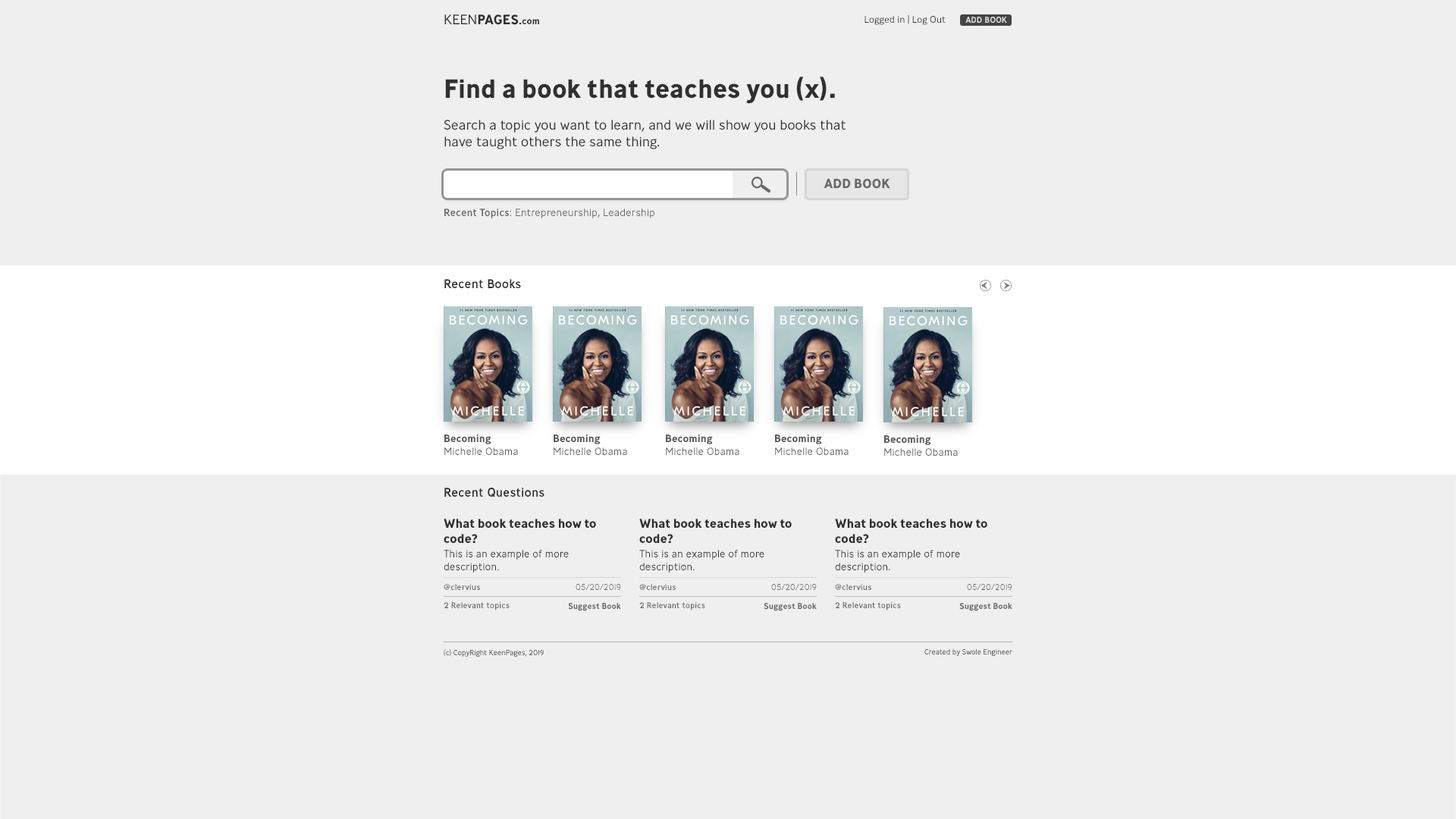
<style>
.page{position:relative;width:1456px;height:819px;background:#efefef}
.page>*{position:absolute;margin:0}
.t1{font:13.7px "Ministry-Bold";color:#303030;text-transform:uppercase}
.t2{font:13.7px "Ministry-Light";color:#303030;text-transform:uppercase}
.t3{font:9.5px "Ministry-Bold";color:#303030}
.t4{font:9.5px "Ministry-Light";color:#303030}
.t5{font:8.4px "Ministry-Medium";color:#ebebeb;text-transform:uppercase}
.t6{font:26.3px "Ministry-Bold";color:#303030}
.t7{font:13.7px "Ministry-Light";color:#303030}
.t8{font:13.2px "Ministry-Bold";color:#676767;text-transform:uppercase}
.t9{font:10.5px "Ministry-Light";color:#676767}
.t10{font:10.5px "Ministry-Medium";color:#676767}
.t11{font:12.6px "Ministry-Medium";color:#303030}
.t12{font:10.5px "Ministry-Light";color:#5c5c5c}
.t13{font:10.5px "Ministry-Bold";color:#5c5c5c}
.t14{font:12.6px "Ministry-Bold";color:#303030}
.t15{font:10.5px/14.7px "Ministry-Light";color:#303030}
.t16{font:10.5px "Ministry-Light";color:#303030}
.t17{font:8.4px "Ministry-Light";color:#696969}
.t18{font:8.4px "Ministry-Medium";color:#696969}
.t19{font:8.4px "Ministry-Medium";color:#696969;text-transform:uppercase}
.t20{font:8.4px "Ministry-Bold";color:#696969}
.t21{font:7.4px "Ministry-Light";color:#303030}
</style>
<div class="page">
<p class="t1" style="left:444px;top:14px;width:95px;height:11px"><span class="t2">Keen</span>Pages<span class="t3">.com</span></p>
<p class="t4" style="left:864px;top:15px;width:82px;height:10px">Logged in | Log Out</p>
<p class="t5" style="left:965px;top:17px;width:42px;height:6px">Add Book</p>
<p class="t6" style="left:445px;top:77px;width:390px;height:27px">Find a book that teaches you (x).</p>
<p class="t7" style="left:444px;top:120px;width:402px;height:29px">Search a topic you want to learn, and we will show you books that have taught others the same thing.</p>
<p class="t8" style="left:824px;top:178px;width:66px;height:11px">Add Book</p>
<p class="t9" style="left:444px;top:209px;width:210px;height:9px"><span class="t10">Recent Topics</span>: Entrepreneurship, Leadership</p>
<p class="t11" style="left:444px;top:279px;width:77px;height:9px">Recent Books</p>
<p class="t12" style="left:444px;top:435px;width:74px;height:20px"><span class="t13">Becoming<br></span>Michelle Obama</p>
<p class="t12" style="left:554px;top:435px;width:73px;height:20px"><span class="t13">Becoming<br></span>Michelle Obama</p>
<p class="t12" style="left:666px;top:435px;width:73px;height:20px"><span class="t13">Becoming<br></span>Michelle Obama</p>
<p class="t12" style="left:775px;top:435px;width:74px;height:20px"><span class="t13">Becoming<br></span>Michelle Obama</p>
<p class="t12" style="left:884px;top:435px;width:74px;height:21px"><span class="t13">Becoming<br></span>Michelle Obama</p>
<p class="t11" style="left:444px;top:488px;width:100px;height:9px">Recent Questions</p>
<p class="t14" style="left:444px;top:519px;width:152px;height:54px">What book teaches how to code?<br><span class="t15">This is an example of more </span><span class="t16">description.</span></p>
<p class="t14" style="left:639px;top:519px;width:153px;height:54px">What book teaches how to code?<br><span class="t15">This is an example of more </span><span class="t16">description.</span></p>
<p class="t14" style="left:835px;top:519px;width:152px;height:54px">What book teaches how to code?<br><span class="t15">This is an example of more </span><span class="t16">description.</span></p>
<p class="t17" style="left:444px;top:584px;width:177px;height:6px"><span class="t18">@clervius </span>05/20/2019</p>
<p class="t17" style="left:639px;top:584px;width:178px;height:6px"><span class="t18">@clervius </span>05/20/2019</p>
<p class="t17" style="left:835px;top:584px;width:177px;height:6px"><span class="t18">@clervius </span>05/20/2019</p>
<p class="t18" style="left:444px;top:602px;width:66px;height:8px"><span class="t19">2 </span>Relevant topics</p>
<p class="t20" style="left:568px;top:603px;width:53px;height:8px">Suggest Book</p>
<p class="t18" style="left:639px;top:602px;width:66px;height:8px"><span class="t19">2 </span>Relevant topics</p>
<p class="t20" style="left:764px;top:603px;width:53px;height:8px">Suggest Book</p>
<p class="t18" style="left:835px;top:602px;width:66px;height:8px"><span class="t19">2 </span>Relevant topics</p>
<p class="t20" style="left:959px;top:603px;width:53px;height:8px">Suggest Book</p>
<p class="t21" style="left:444px;top:649px;width:100px;height:8px">(c) CopyRight KeenPages, 2019</p>
<p class="t21" style="left:924px;top:649px;width:88px;height:7px">Created by Swole Engineer</p>
</div>
